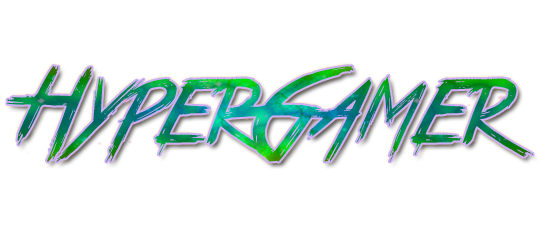
<style>
.page{position:relative;width:545px;height:234px;background:#ffffff}
.page>*{position:absolute;margin:0}
.t1{font:92px "TrueLies"}
</style>
<div class="page">
<p class="t1" style="left:7px;top:66px;width:526px;height:96px">HyperGamer</p>
</div>
